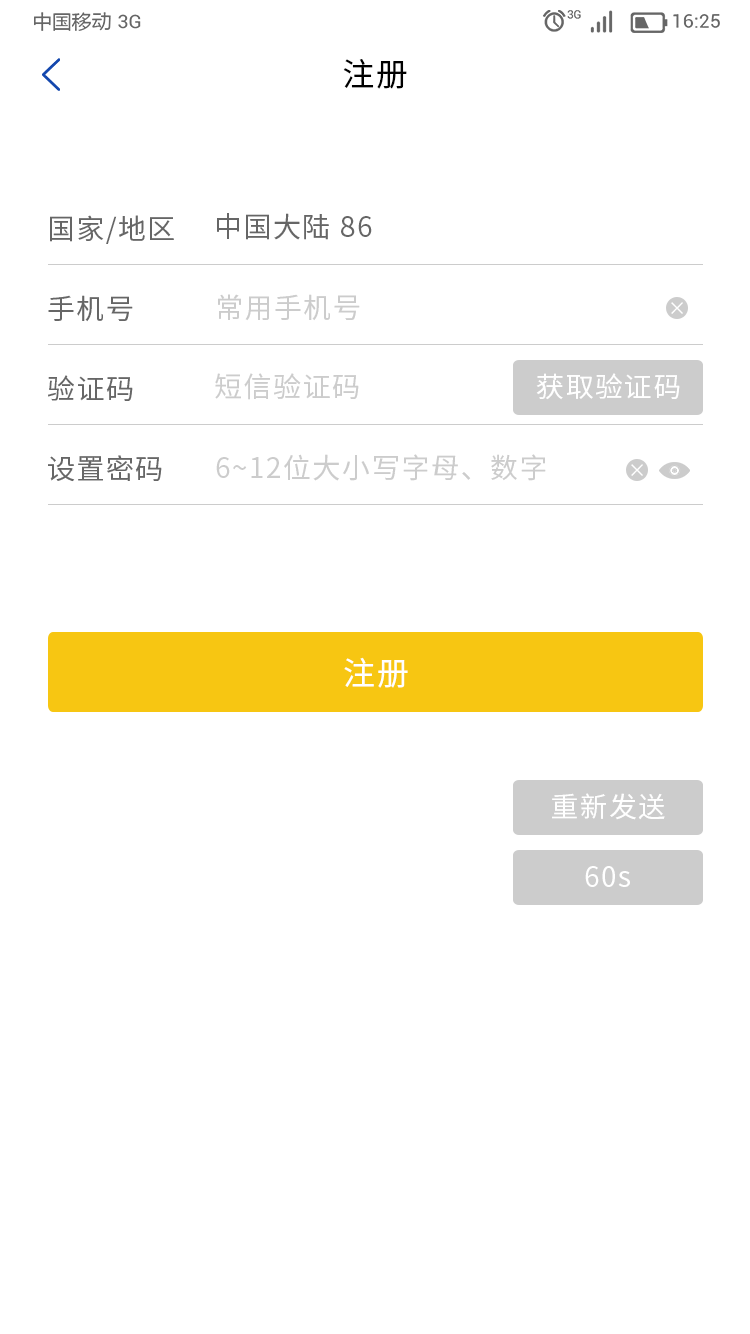
<style>
.page{position:relative;width:750px;height:1334px;background:#ffffff}
.page>*{position:absolute;margin:0}
.t1{font:32px "SourceHanSansCN-Regular";letter-spacing:0.05em;color:#000000}
.t2{font:28px "SourceHanSansCN-Regular";letter-spacing:0.05em;color:#666666}
.t3{font:28.1px "SourceHanSansCN-Regular";letter-spacing:0.05em;color:#666666}
.t4{font:28.1px "SourceHanSansCN-Regular";letter-spacing:0.05em;color:#cccccc}
.t5{font:28px "SourceHanSansCN-Regular";letter-spacing:0.05em;color:#ffffff}
.t6{font:32px "SourceHanSansCN-Regular";letter-spacing:0.05em;color:#ffffff}
</style>
<div class="page">
<p class="t1" style="left:343px;top:59px;width:64px;height:30px">注册</p>
<p class="t2" style="left:50px;top:215px;width:124px;height:29px">国家/地区</p>
<p class="t3" style="left:217px;top:213px;width:155px;height:27px">中国大陆 86</p>
<p class="t4" style="left:218px;top:294px;width:142px;height:27px">常用手机号</p>
<p class="t2" style="left:48px;top:295px;width:85px;height:27px">手机号</p>
<p class="t2" style="left:48px;top:375px;width:85px;height:26px">验证码</p>
<p class="t4" style="left:215px;top:373px;width:144px;height:27px">短信验证码</p>
<p class="t5" style="left:536px;top:373px;width:144px;height:27px">获取验证码</p>
<p class="t2" style="left:48px;top:455px;width:114px;height:27px">设置密码</p>
<p class="t4" style="left:216px;top:454px;width:330px;height:27px">6~12位大小写字母、数字</p>
<p class="t6" style="left:344px;top:657px;width:64px;height:31px">注册</p>
<p class="t5" style="left:552px;top:793px;width:113px;height:27px">重新发送</p>
<p class="t5" style="left:585px;top:866px;width:45px;height:21px">60s</p>
</div>
